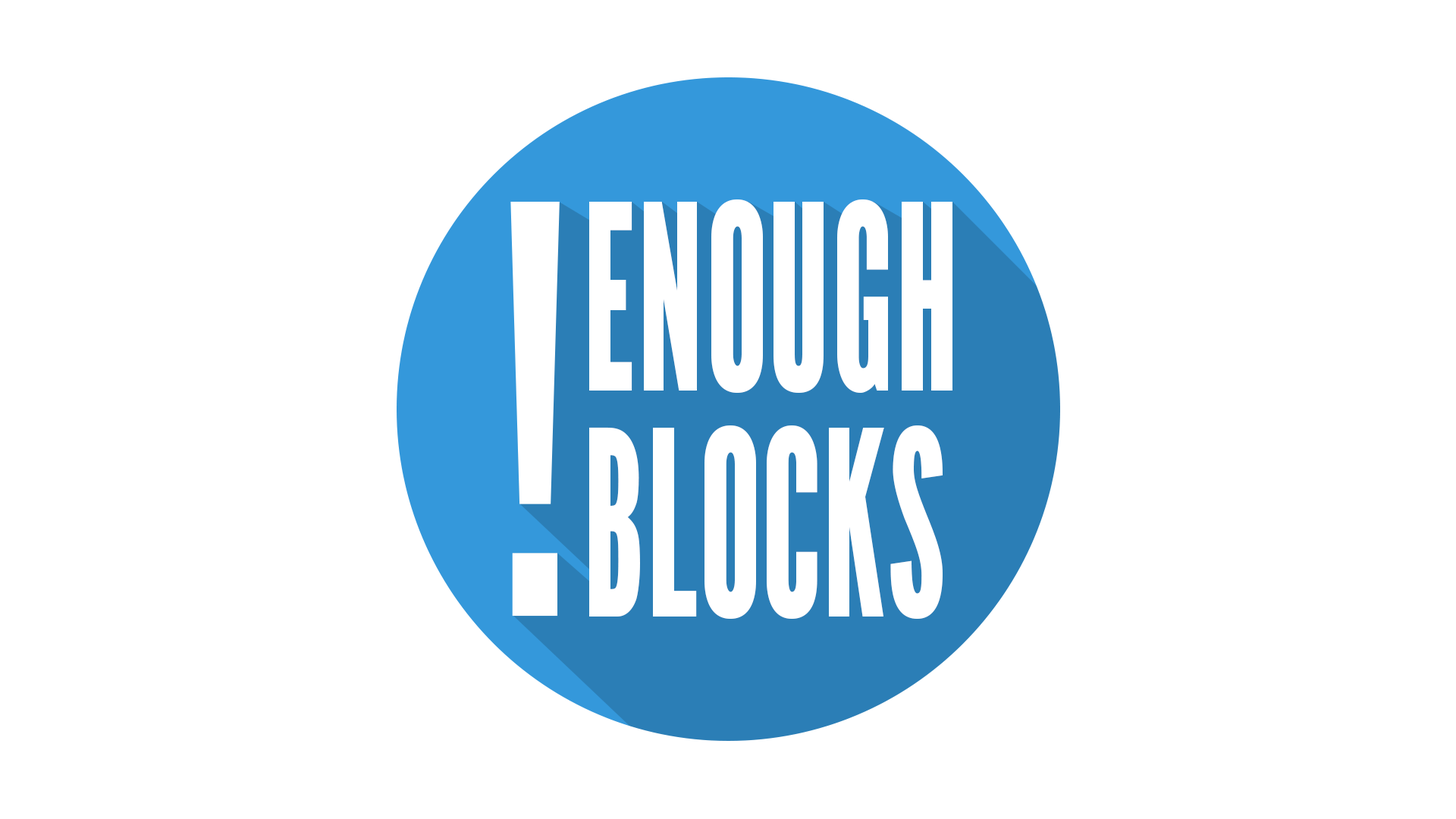
<style>
.page{position:relative;width:1456px;height:819px;background:#ffffff}
.page>*{position:absolute;margin:0}
.t1{font:256.5px "LeagueGothic-CondensedRegular";color:#ffffff}
</style>
<div class="page">
<p class="t1" style="left:589px;top:199px;width:363px;height:194px">ENOUGH</p>
<p class="t1" style="left:589px;top:425px;width:354px;height:194px">BLOCKS</p>
</div>
